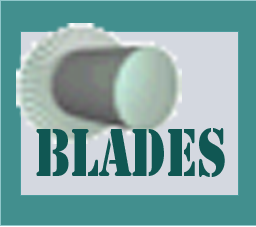
<style>
.page{position:relative;width:256px;height:227px;background:#428f8e}
.page>*{position:absolute;margin:0}
.t1{font:63.1px "StencilStd";color:#105753;scale:0.75 1}
</style>
<div class="page">
<p class="t1" style="left:36px;top:128px;width:189px;height:49px">Blades</p>
</div>
